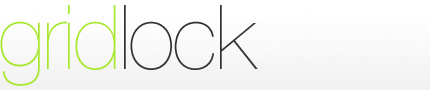
<style>
.page{position:relative;width:430px;height:90px}
.page>*{position:absolute;margin:0}
.t1{font:89.6px "HelveticaNeue-UltraLight";letter-spacing:-0.025em;color:#a8e72f}
.t2{font:89.6px "HelveticaNeue-UltraLight";letter-spacing:-0.025em;color:#333333}
</style>
<div class="page">
<p class="t1" style="left:0px;top:5px;width:258px;height:81px">grid<span class="t2">lock</span></p>
</div>
